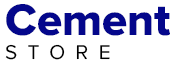
<style>
.page{position:relative;width:176px;height:62px;background:#ffffff}
.page>*{position:absolute;margin:0}
.t1{font:45.8px "ProximaNova-Extrabld";color:#04078c}
.t2{font:20.8px "ProximaNova-Regular";letter-spacing:0.5em;color:#000000;text-transform:uppercase}
</style>
<div class="page">
<p class="t1" style="left:6px;top:4px;width:164px;height:32px">Cement</p>
<p class="t2" style="left:5px;top:44px;width:105px;height:16px">Store</p>
</div>
